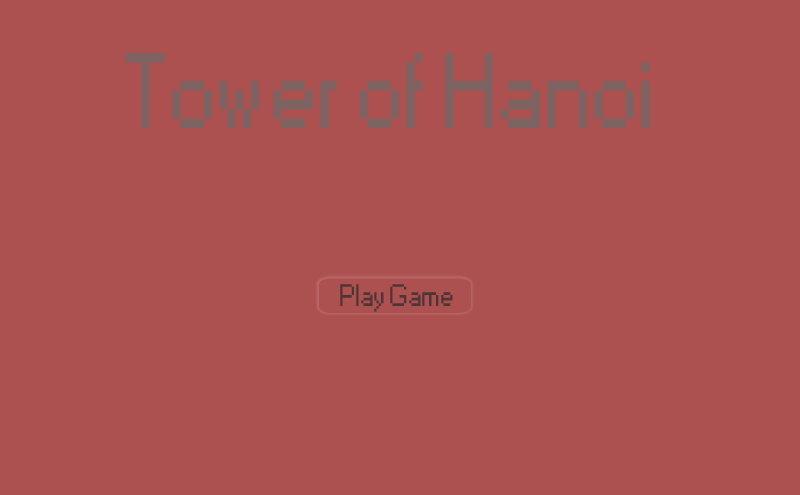
<style>
.page{position:relative;width:800px;height:495px;background:#ac5050}
.page>*{position:absolute;margin:0}
.t1{font:100px "Small Fonts";color:#7e6363}
.t2{font:29.2px "Small Fonts";color:#4c3535}
</style>
<div class="page">
<p class="t1" style="left:125px;top:53px;width:525px;height:75px">Tower of Hanoi</p>
<p class="t2" style="left:340px;top:284px;width:113px;height:28px">Play Game</p>
</div>
